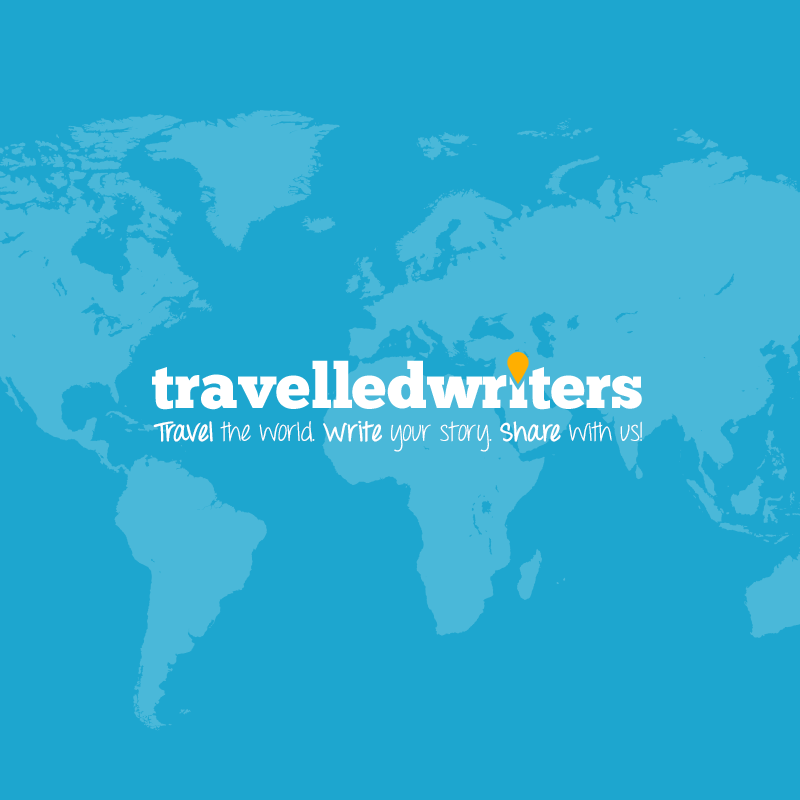
<style>
.page{position:relative;width:800px;height:800px;background:#1da6cf}
.page>*{position:absolute;margin:0}
.t1{font:26.5px "ThrowMyHandsUpintheAir";color:#ffffff}
.t2{font:26.5px "ThrowMyHandsUpintheAir-Bold";color:#ffffff}
</style>
<div class="page">
<p class="t1" style="left:153px;top:420px;width:489px;height:32px"><span class="t2">Travel</span> the world. <span class="t2">Write</span> your story. <span class="t2">Share</span> with us!</p>
</div>
